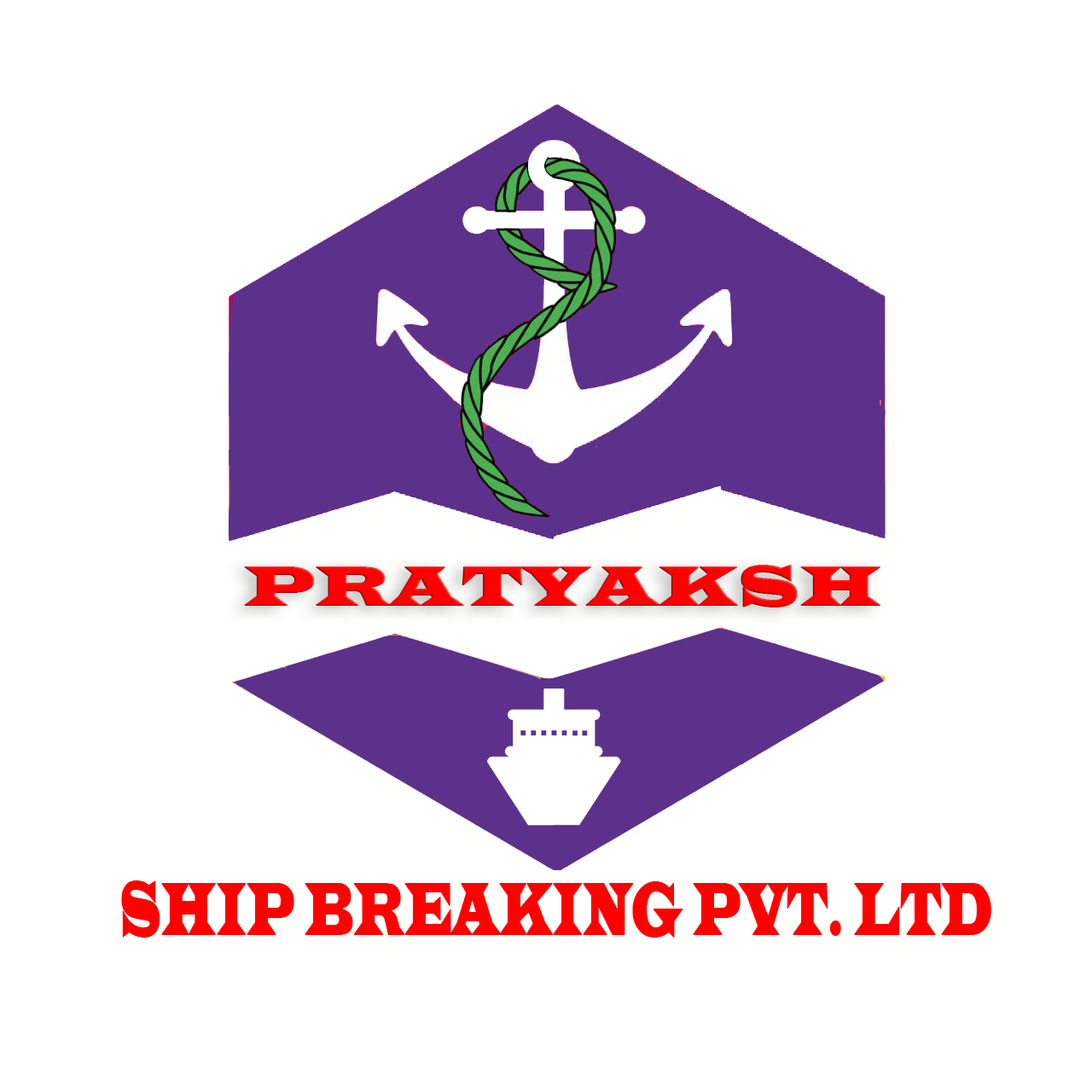
<style>
.page{position:relative;width:1092px;height:1092px;background:#fffffd}
.page>*{position:absolute;margin:0}
.t1{font:57.6px "LatinWide";color:#ff0000;text-transform:uppercase;font-weight:bold;scale:0.88 1}
.t2{font:76.8px "LatinWide";color:#ff0000;text-transform:uppercase;font-weight:bold;scale:0.44 1}
</style>
<div class="page">
<p class="t1" style="left:244px;top:565px;width:636px;height:42px">pratyaksh</p>
<p class="t2" style="left:121px;top:880px;width:870px;height:58px">SHIP BREAKING PVT. LTD</p>
</div>
